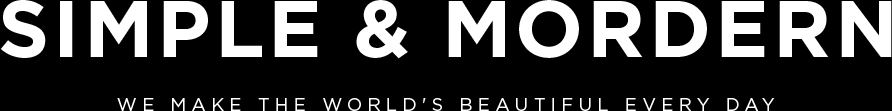
<style>
.page{position:relative;width:892px;height:111px;background:#000000}
.page>*{position:absolute;margin:0}
.t1{font:80px "Gotham-Bold";letter-spacing:0.05em;color:#ffffff;text-transform:uppercase}
.t2{font:18px "Gotham-Book";letter-spacing:0.3em;color:#ffffff;text-transform:uppercase}
</style>
<div class="page">
<p class="t1" style="left:0px;top:0px;width:892px;height:59px">Simple &amp; mordern</p>
<p class="t2" style="left:117px;top:98px;width:658px;height:13px">We make the world's beautiful every day</p>
</div>
